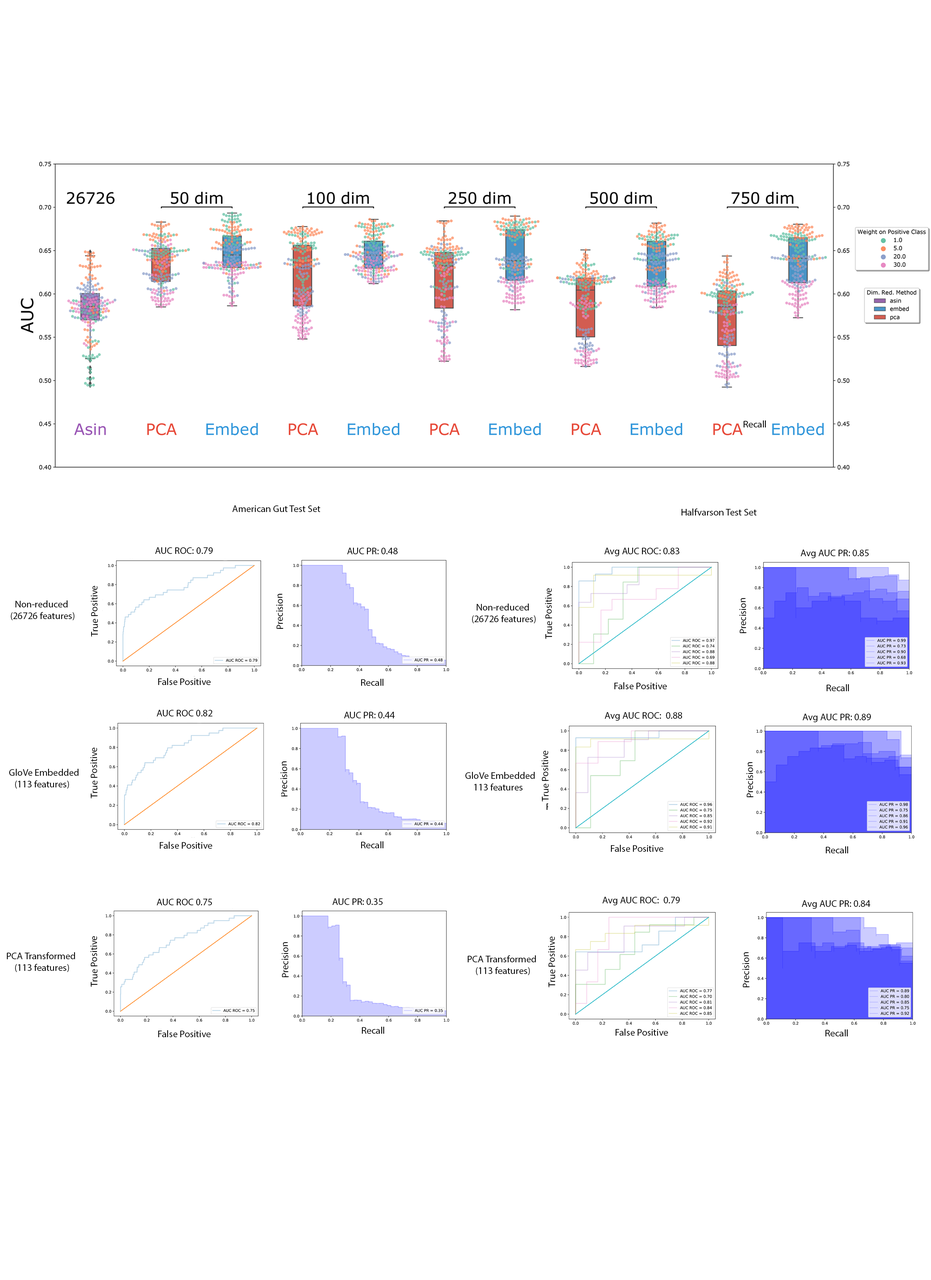
<style>
.page{position:relative;width:931px;height:1280px;background:#ffffff}
.page>*{position:absolute;margin:0}
.t1{font:9.7px "MyriadPro-Regular";color:#000000}
</style>
<div class="page">
<p class="t1" style="left:744px;top:421px;width:22px;height:7px">Recall</p>
<p class="t1" style="left:232px;top:506px;width:89px;height:6px">American Gut Test Set</p>
<p class="t1" style="left:682px;top:509px;width:75px;height:7px">Halfvarson Test Set</p>
<p class="t1" style="left:155px;top:547px;width:58px;height:7px">AUC ROC: 0.79</p>
<p class="t1" style="left:347px;top:548px;width:51px;height:6px">AUC PR: 0.48</p>
<p class="t1" style="left:605px;top:548px;width:75px;height:8px">Avg AUC ROC: 0.83</p>
<p class="t1" style="left:801px;top:550px;width:68px;height:8px">Avg AUC PR: 0.85</p>
<p class="t1" style="left:91px;top:586px;width:7px;height:51px;rotate:-91deg">True Positive</p>
<p class="t1" style="left:545px;top:588px;width:8px;height:51px;rotate:-91deg">True Positive</p>
<p class="t1" style="left:11px;top:601px;width:63px;height:20px;text-align:center">Non-reduced<br> (26726 features)</p>
<p class="t1" style="left:276px;top:594px;width:7px;height:35px;rotate:-91deg">Precision</p>
<p class="t1" style="left:472px;top:604px;width:64px;height:20px;text-align:center">Non-reduced<br> (26726 features)</p>
<p class="t1" style="left:740px;top:598px;width:7px;height:36px;rotate:-91deg">Precision</p>
<p class="t1" style="left:158px;top:678px;width:53px;height:7px">False Positive</p>
<p class="t1" style="left:361px;top:679px;width:23px;height:7px">Recall</p>
<p class="t1" style="left:615px;top:683px;width:52px;height:7px">False Positive</p>
<p class="t1" style="left:827px;top:684px;width:22px;height:7px">Recall</p>
<p class="t1" style="left:157px;top:710px;width:56px;height:7px">AUC ROC 0.82</p>
<p class="t1" style="left:344px;top:712px;width:51px;height:7px">AUC PR: 0.44</p>
<p class="t1" style="left:605px;top:712px;width:78px;height:9px">Avg AUC ROC:  0.88</p>
<p class="t1" style="left:803px;top:714px;width:68px;height:8px">Avg AUC PR: 0.89</p>
<p class="t1" style="left:90px;top:748px;width:8px;height:51px;rotate:-91deg">True Positive</p>
<p class="t1" style="left:281px;top:762px;width:7px;height:35px;rotate:-91deg">Precision</p>
<p class="t1" style="left:542px;top:751px;width:7px;height:51px;rotate:-91deg">True Positive</p>
<p class="t1" style="left:9px;top:769px;width:70px;height:20px;text-align:center">GloVe Embedded<br> (113 features)</p>
<p class="t1" style="left:465px;top:772px;width:70px;height:19px;text-align:center">GloVe Embedded<br> 113 features</p>
<p class="t1" style="left:747px;top:762px;width:7px;height:36px;rotate:-91deg">Precision</p>
<p class="t1" style="left:160px;top:842px;width:52px;height:7px">False Positive</p>
<p class="t1" style="left:361px;top:842px;width:23px;height:7px">Recall</p>
<p class="t1" style="left:611px;top:845px;width:53px;height:7px">False Positive</p>
<p class="t1" style="left:826px;top:847px;width:23px;height:7px">Recall</p>
<p class="t1" style="left:157px;top:899px;width:55px;height:7px">AUC ROC 0.75</p>
<p class="t1" style="left:333px;top:899px;width:50px;height:6px">AUC PR: 0.35</p>
<p class="t1" style="left:603px;top:897px;width:77px;height:9px">Avg AUC ROC:  0.79</p>
<p class="t1" style="left:802px;top:901px;width:69px;height:8px">Avg AUC PR: 0.84</p>
<p class="t1" style="left:90px;top:936px;width:8px;height:52px;rotate:-91deg">True Positive</p>
<p class="t1" style="left:548px;top:937px;width:8px;height:51px;rotate:-91deg">True Positive</p>
<p class="t1" style="left:7px;top:953px;width:68px;height:20px;text-align:center">PCA Transformed<br> (113 features)</p>
<p class="t1" style="left:282px;top:943px;width:7px;height:35px;rotate:-91deg">Precision</p>
<p class="t1" style="left:743px;top:953px;width:7px;height:35px;rotate:-91deg">Precision</p>
<p class="t1" style="left:468px;top:956px;width:68px;height:20px;text-align:center">PCA Transformed<br> (113 features)</p>
<p class="t1" style="left:158px;top:1031px;width:53px;height:7px">False Positive</p>
<p class="t1" style="left:362px;top:1027px;width:23px;height:7px">Recall</p>
<p class="t1" style="left:616px;top:1029px;width:52px;height:7px">False Positive</p>
<p class="t1" style="left:826px;top:1030px;width:22px;height:7px">Recall</p>
</div>
